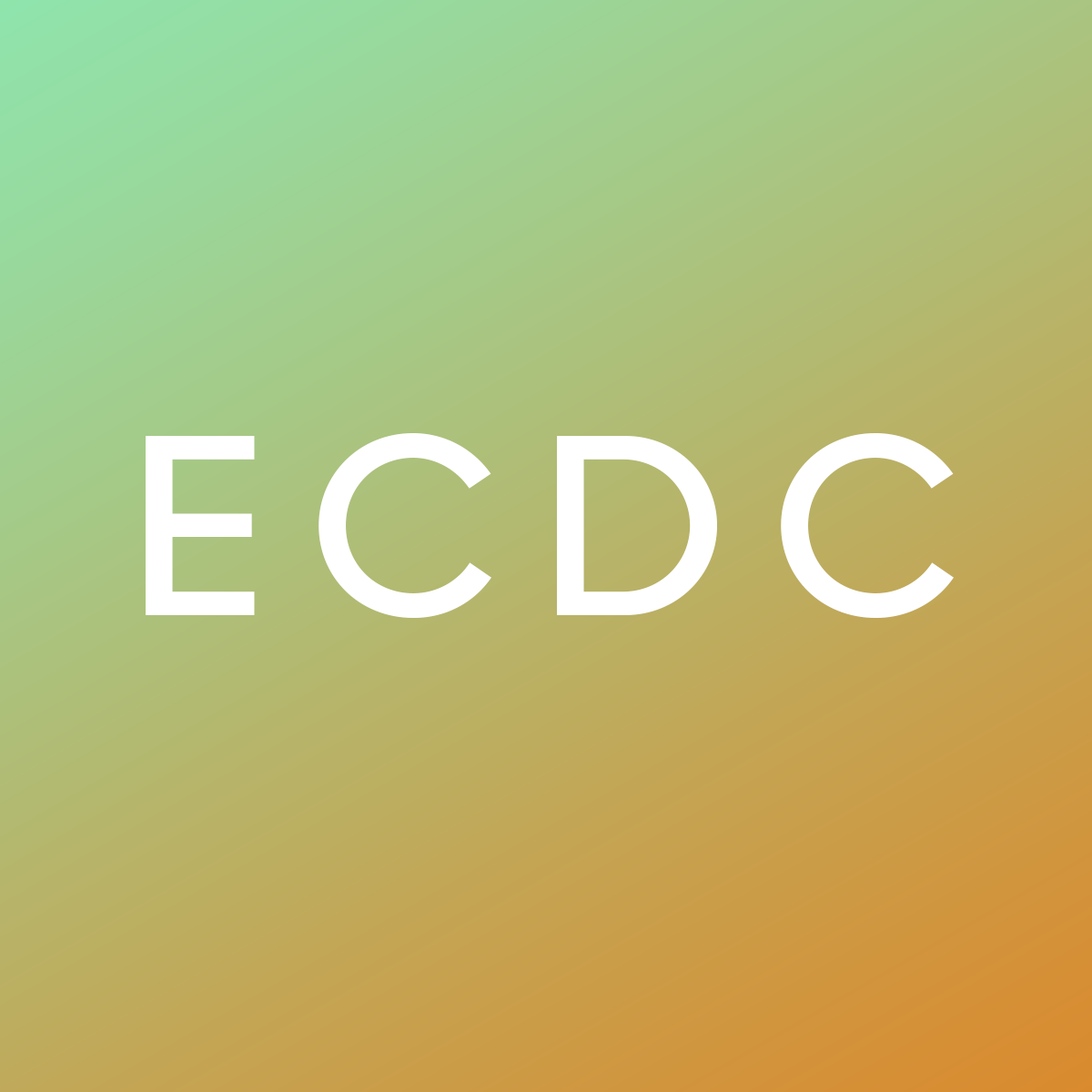
<style>
.page{position:relative;width:1092px;height:1092px}
.page>*{position:absolute;margin:0}
.t1{font:255.7px "UberMove-Medium";letter-spacing:0.18em;color:#ffffff}
</style>
<div class="page">
<p class="t1" style="left:146px;top:433px;width:808px;height:185px">ECDC</p>
</div>
